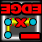
<style>
.page{position:relative;width:42px;height:42px}
.page>*{position:absolute;margin:0}
.t1{font:12.8px "Arial-Black";letter-spacing:-0.075em;color:#ff0000;scale:1.16 1}
.t2{font:11.2px "Arial-Black";letter-spacing:-0.075em;color:#ff0000;scale:1.25 1}
.t3{font:28.8px "Arial-Black";letter-spacing:-0.075em;color:#ff0000;scale:2.2 1}
</style>
<div class="page">
<p class="t1" style="left:0px;top:4px;width:42px;height:10px;rotate:-180deg">EDGE</p>
<p class="t2" style="left:15px;top:18px;width:12px;height:9px;rotate:-180deg">X</p>
<p class="t3" style="left:21px;top:34px;width:19px;height:5px;rotate:-180deg">-</p>
</div>
